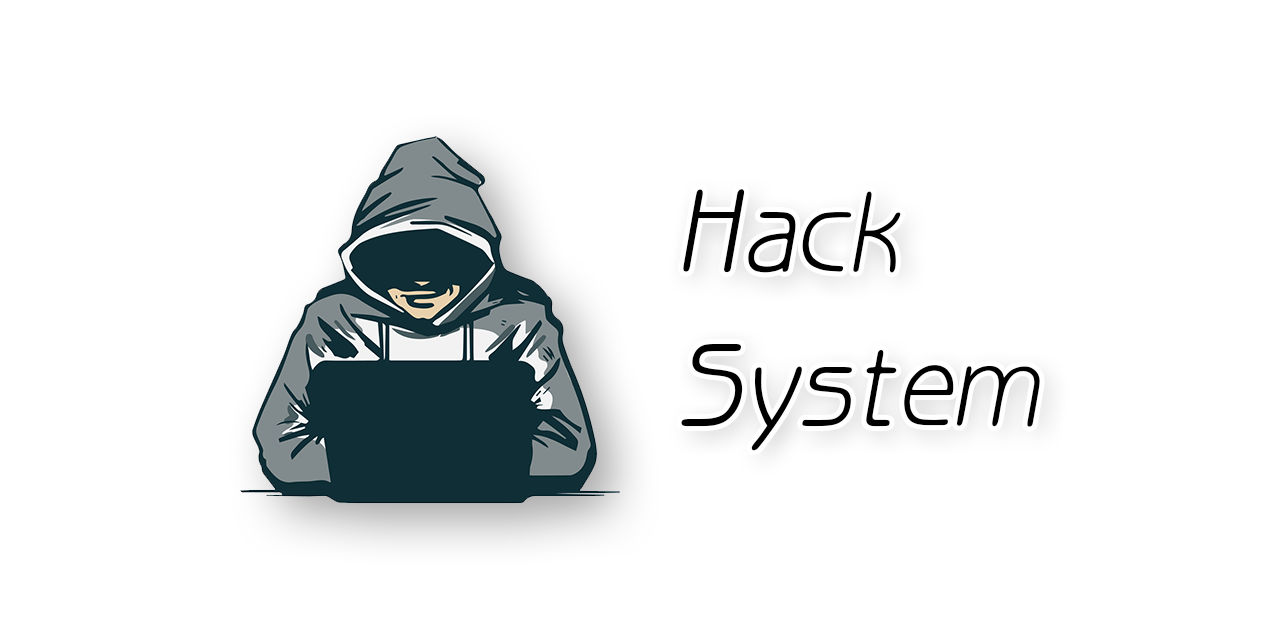
<style>
.page{position:relative;width:1280px;height:640px;background:#ffffff}
.page>*{position:absolute;margin:0}
.t1{font:128px "HYj1gf";color:#000000;font-style:italic}
</style>
<div class="page">
<p class="t1" style="left:681px;top:189px;width:359px;height:262px">Hack<br>System</p>
</div>
